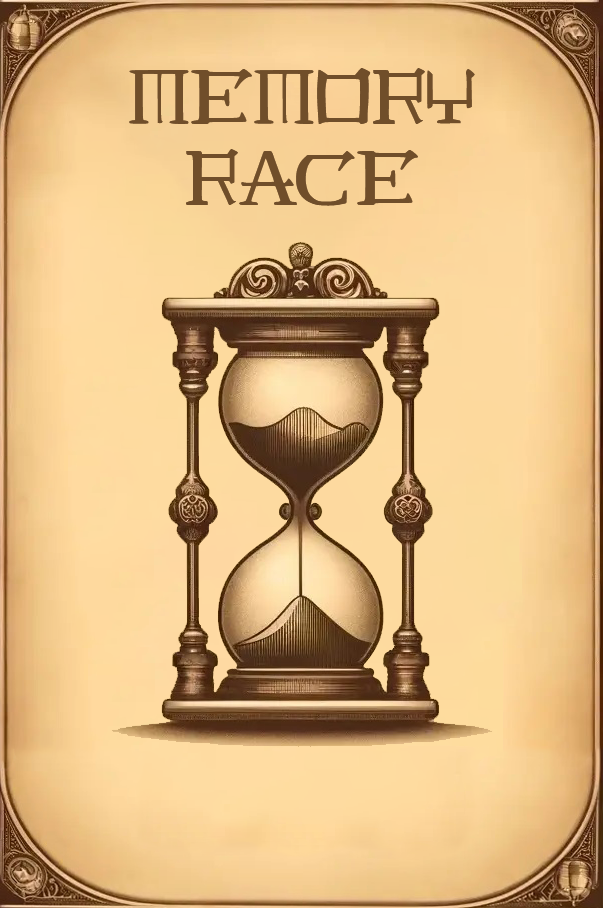
<style>
.page{position:relative;width:603px;height:908px}
.page>*{position:absolute;margin:0}
.t1{font:67.1px "JMH-Laudanum-EG";color:#704e2a}
</style>
<div class="page">
<p class="t1" style="left:129px;top:68px;width:346px;height:138px;text-align:center">MEMORY<br>RACE</p>
</div>
